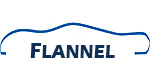
<style>
.page{position:relative;width:150px;height:70px;background:#ffffff}
.page>*{position:absolute;margin:0}
.t1{font:19.9px "ErasITC-Bold";color:#0f2f55;scale:0.86 1}
.t2{font:22px "ErasITC-Bold";color:#0f2f55;scale:0.86 1}
</style>
<div class="page">
<p class="t1" style="left:30px;top:43px;width:85px;height:15px"><span class="t2">F</span>LANNEL</p>
</div>
